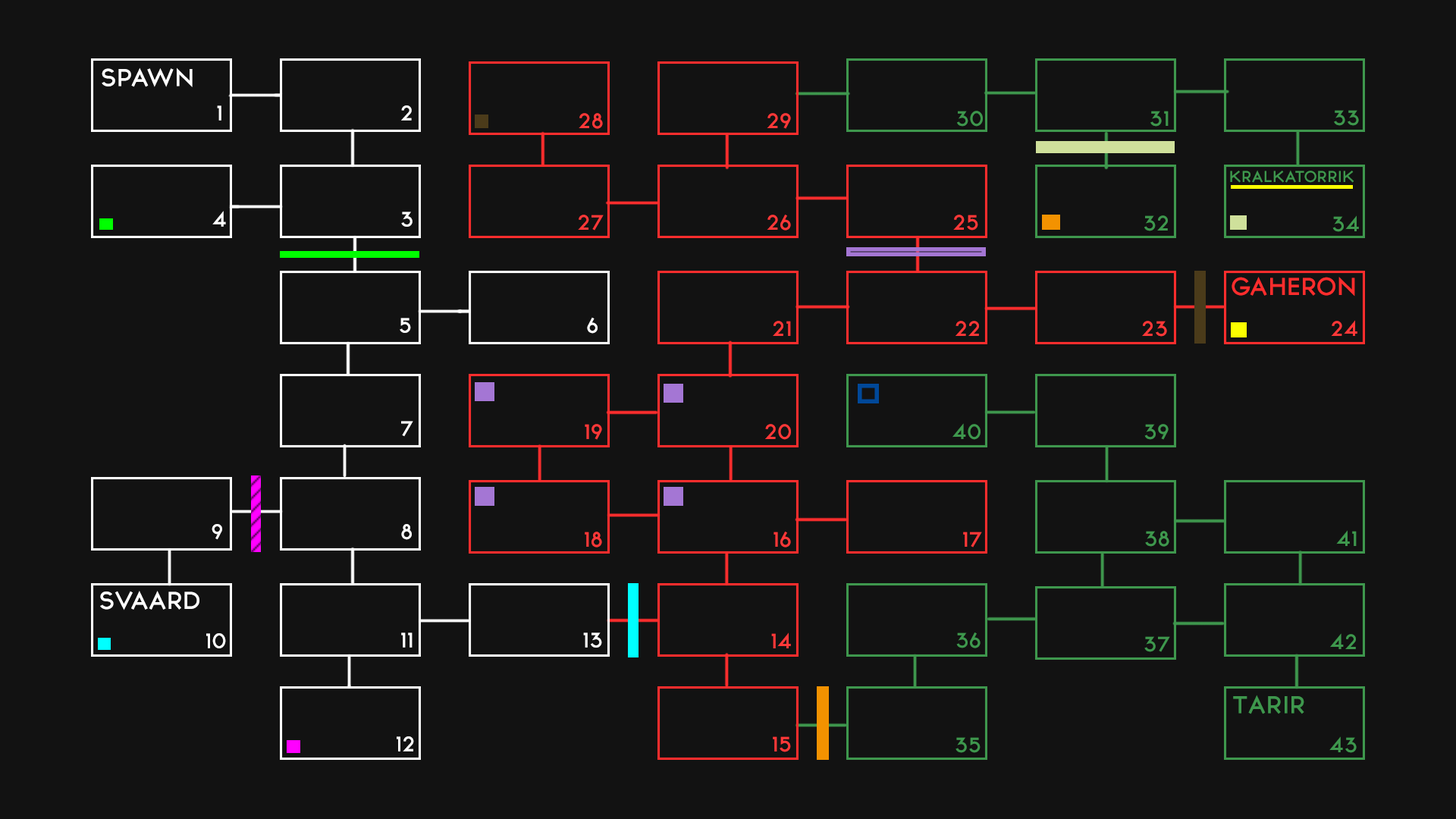
<style>
.page{position:relative;width:1456px;height:819px;background:#121212}
.page>*{position:absolute;margin:0}
.t1{font:22.1px "TYPOGRAPHPRO-SemiBold";color:#ffffff}
.t2{font:19px "TYPOGRAPHPRO-SemiBold";color:#ffffff}
.t3{font:19px "TYPOGRAPHPRO-SemiBold";color:#ff3838}
.t4{font:19px "TYPOGRAPHPRO-SemiBold";color:#3e974d}
.t5{font:14.2px "TYPOGRAPHPRO-SemiBold";color:#3e974d}
.t6{font:22.1px "TYPOGRAPHPRO-SemiBold";color:#ff2d2d}
.t7{font:22.1px "TYPOGRAPHPRO-SemiBold";color:#3e974d}
</style>
<div class="page">
<p class="t1" style="left:102px;top:67px;width:91px;height:20px">SPAWN</p>
<p class="t2" style="left:217px;top:105px;width:4px;height:16px">1</p>
<p class="t2" style="left:401px;top:105px;width:11px;height:16px">2</p>
<p class="t3" style="left:579px;top:113px;width:24px;height:16px">28</p>
<p class="t3" style="left:767px;top:113px;width:24px;height:16px">29</p>
<p class="t4" style="left:957px;top:111px;width:26px;height:16px">30</p>
<p class="t4" style="left:1150px;top:111px;width:19px;height:16px">31</p>
<p class="t4" style="left:1334px;top:110px;width:25px;height:16px">33</p>
<p class="t5" style="left:1230px;top:170px;width:124px;height:13px">KRALKATORRIK</p>
<p class="t2" style="left:212px;top:211px;width:14px;height:16px">4</p>
<p class="t2" style="left:401px;top:212px;width:12px;height:15px">3</p>
<p class="t3" style="left:578px;top:215px;width:26px;height:16px">27</p>
<p class="t3" style="left:767px;top:215px;width:24px;height:16px">26</p>
<p class="t3" style="left:953px;top:215px;width:25px;height:16px">25</p>
<p class="t4" style="left:1144px;top:215px;width:24px;height:16px">32</p>
<p class="t4" style="left:1332px;top:215px;width:27px;height:17px">34</p>
<p class="t6" style="left:1232px;top:277px;width:123px;height:20px">GAHERON</p>
<p class="t2" style="left:400px;top:318px;width:11px;height:15px">5</p>
<p class="t2" style="left:587px;top:317px;width:11px;height:17px">6</p>
<p class="t3" style="left:773px;top:321px;width:18px;height:15px">21</p>
<p class="t3" style="left:955px;top:321px;width:24px;height:15px">22</p>
<p class="t3" style="left:1142px;top:321px;width:25px;height:16px">23</p>
<p class="t3" style="left:1331px;top:320px;width:26px;height:16px">24</p>
<p class="t2" style="left:401px;top:421px;width:12px;height:16px">7</p>
<p class="t3" style="left:585px;top:424px;width:17px;height:16px">19</p>
<p class="t3" style="left:765px;top:424px;width:26px;height:16px">20</p>
<p class="t4" style="left:952px;top:423px;width:29px;height:17px">40</p>
<p class="t4" style="left:1144px;top:424px;width:25px;height:16px">39</p>
<p class="t2" style="left:212px;top:524px;width:10px;height:16px">9</p>
<p class="t2" style="left:401px;top:524px;width:11px;height:16px">8</p>
<p class="t3" style="left:585px;top:532px;width:17px;height:16px">18</p>
<p class="t3" style="left:773px;top:532px;width:18px;height:16px">16</p>
<p class="t3" style="left:963px;top:532px;width:19px;height:16px">17</p>
<p class="t4" style="left:1145px;top:531px;width:24px;height:16px">38</p>
<p class="t4" style="left:1336px;top:530px;width:21px;height:16px">41</p>
<p class="t1" style="left:100px;top:591px;width:99px;height:19px">SVAARD</p>
<p class="t2" style="left:206px;top:633px;width:20px;height:15px">10</p>
<p class="t2" style="left:401px;top:632px;width:12px;height:16px">11</p>
<p class="t2" style="left:583px;top:632px;width:19px;height:16px">13</p>
<p class="t3" style="left:771px;top:632px;width:20px;height:16px">14</p>
<p class="t4" style="left:956px;top:632px;width:25px;height:16px">36</p>
<p class="t4" style="left:1144px;top:636px;width:26px;height:16px">37</p>
<p class="t4" style="left:1330px;top:633px;width:26px;height:16px">42</p>
<p class="t7" style="left:1233px;top:695px;width:71px;height:19px">TARIR</p>
<p class="t2" style="left:397px;top:736px;width:17px;height:15px">12</p>
<p class="t3" style="left:773px;top:736px;width:18px;height:16px">15</p>
<p class="t4" style="left:955px;top:737px;width:26px;height:16px">35</p>
<p class="t4" style="left:1329px;top:736px;width:28px;height:17px">43</p>
</div>
